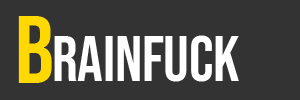
<style>
.page{position:relative;width:300px;height:100px;background:#333333}
.page>*{position:absolute;margin:0}
.t1{font:96.5px "BebasNeue-Regular";letter-spacing:-0.025em;color:#ffd800}
.t2{font:64px "BebasNeue-Regular";letter-spacing:-0.005em;color:#ffffff}
</style>
<div class="page">
<p class="t1" style="left:18px;top:16px;width:34px;height:67px">B</p>
<p class="t2" style="left:54px;top:35px;width:185px;height:47px">rainfuck</p>
</div>
